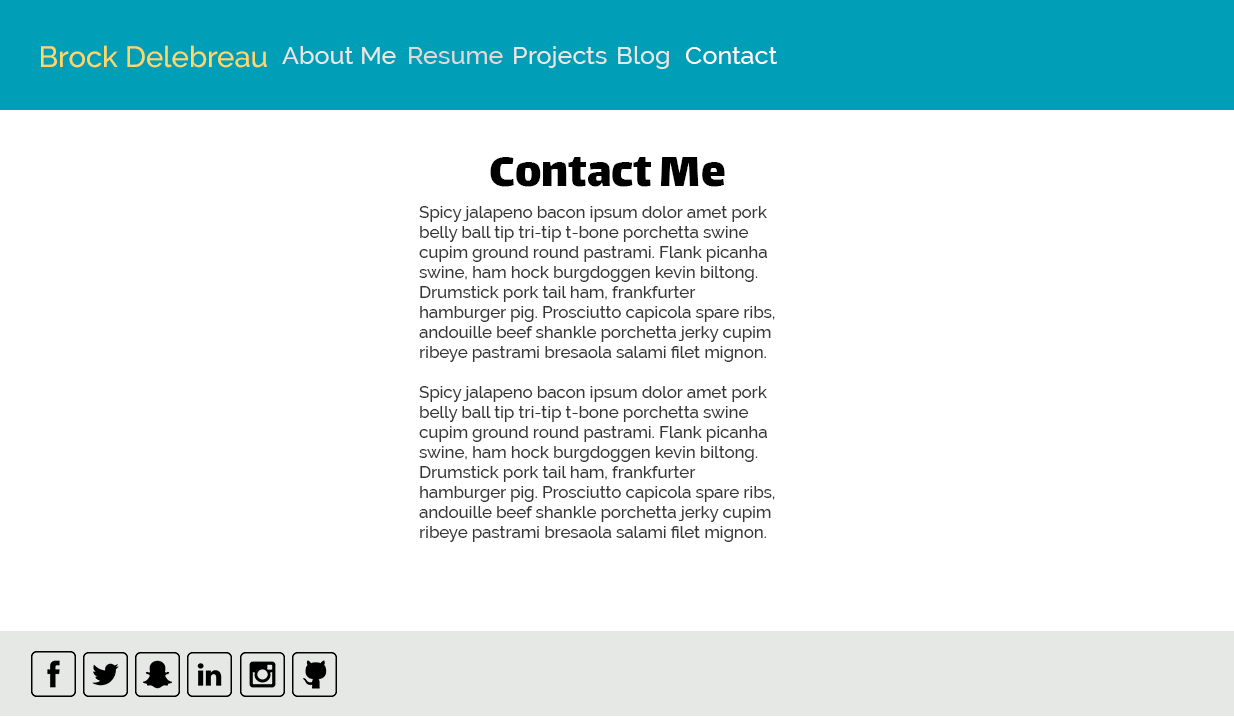
<style>
.page{position:relative;width:1234px;height:717px;background:#ffffff}
.page>*{position:absolute;margin:0}
.t1{font:29.2px "Raleway-Medium";color:#fed766}
.t2{font:25px "Raleway-Medium";color:#e6e8e6}
.t3{font:25px "Raleway-Medium";color:#d8dbd8}
.t4{font:25px "Raleway-Medium";color:#ffffff}
.t5{font:50px "Lalezar-Regular";color:#000000}
.t6{font:16.7px "Raleway-Medium";color:#363537}
</style>
<div class="page">
<p class="t1" style="left:41px;top:45px;width:226px;height:23px">Brock Delebreau</p>
<p class="t2" style="left:282px;top:46px;width:114px;height:18px">About Me</p>
<p class="t3" style="left:409px;top:47px;width:94px;height:17px">Resume</p>
<p class="t2" style="left:514px;top:46px;width:93px;height:22px">Projects</p>
<p class="t2" style="left:618px;top:46px;width:51px;height:23px">Blog</p>
<p class="t4" style="left:686px;top:47px;width:91px;height:17px">Contact</p>
<p class="t5" style="left:490px;top:157px;width:235px;height:30px">Contact Me</p>
<p class="t6" style="left:419px;top:206px;width:356px;height:336px">Spicy jalapeno bacon ipsum dolor amet pork belly ball tip tri-tip t-bone porchetta swine cupim ground round pastrami. Flank picanha swine, ham hock burgdoggen kevin biltong. Drumstick pork tail ham, frankfurter hamburger pig. Prosciutto capicola spare ribs, andouille beef shankle porchetta jerky cupim ribeye pastrami bresaola salami filet mignon.<br><br>Spicy jalapeno bacon ipsum dolor amet pork belly ball tip tri-tip t-bone porchetta swine cupim ground round pastrami. Flank picanha swine, ham hock burgdoggen kevin biltong. Drumstick pork tail ham, frankfurter hamburger pig. Prosciutto capicola spare ribs, andouille beef shankle porchetta jerky cupim ribeye pastrami bresaola salami filet mignon.</p>
</div>
